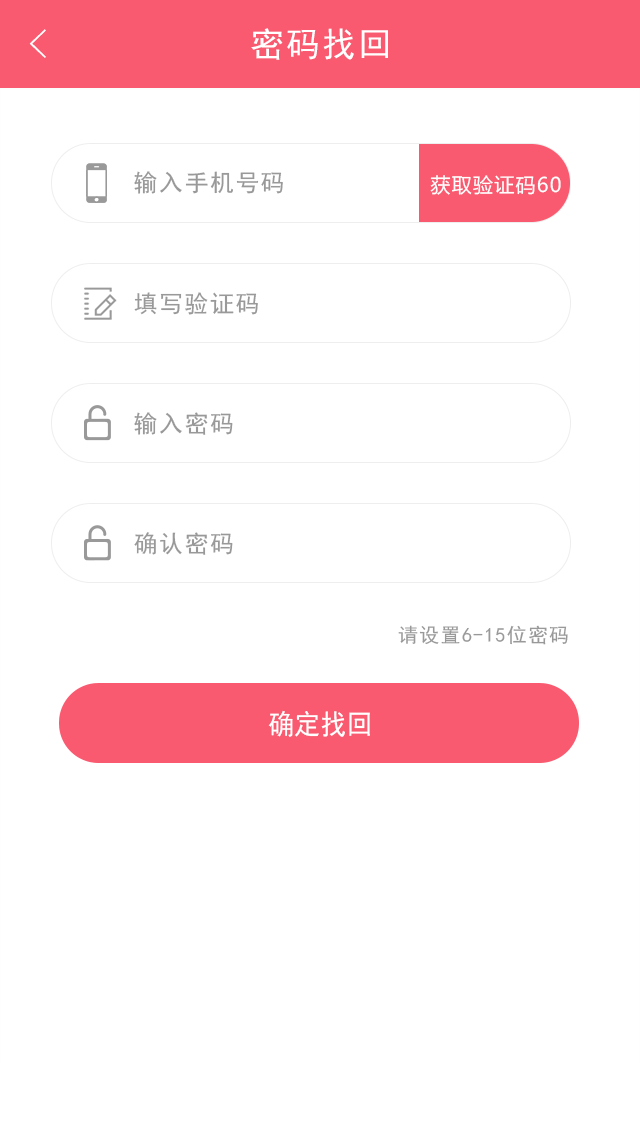
<style>
.page{position:relative;width:640px;height:1136px;background:#ffffff}
.page>*{position:absolute;margin:0}
.t1{font:40px "FZYXJW--GB1-0";color:#ffffff}
.t2{font:34px "SimHei";letter-spacing:0.06em;color:#ffffff}
.t3{font:24px "SimHei";letter-spacing:0.06em;color:#999999}
.t4{font:20px "MicrosoftYaHei";letter-spacing:0.06em;color:#ffffff}
.t5{font:20px "SimHei";letter-spacing:0.06em;color:#999999}
.t6{font:28px "SimHei";color:#ffffff;scale:0.94 1}
</style>
<div class="page">
<p class="t1" style="left:29px;top:29px;width:17px;height:29px">&lt;</p>
<p class="t2" style="left:251px;top:28px;width:137px;height:32px">密码找回</p>
<p class="t3" style="left:134px;top:171px;width:149px;height:23px">输入手机号码</p>
<p class="t4" style="left:430px;top:175px;width:131px;height:20px">获取验证码60</p>
<p class="t3" style="left:134px;top:292px;width:124px;height:23px">填写验证码</p>
<p class="t3" style="left:134px;top:412px;width:99px;height:23px">输入密码</p>
<p class="t3" style="left:134px;top:532px;width:99px;height:23px">确认密码</p>
<p class="t5" style="left:398px;top:625px;width:170px;height:20px">请设置6-15位密码</p>
<p class="t6" style="left:268px;top:710px;width:102px;height:27px">确定找回</p>
</div>
